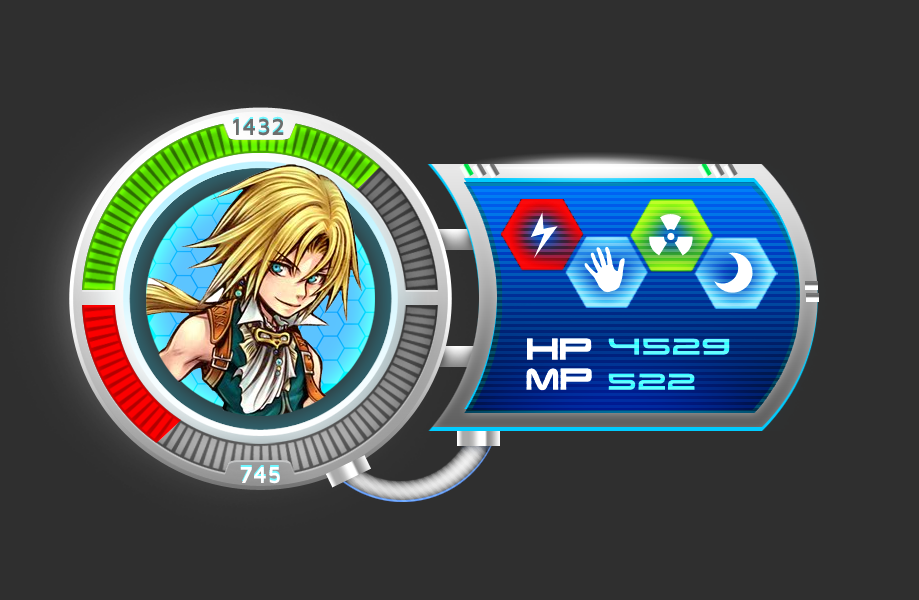
<style>
.page{position:relative;width:919px;height:600px;background:#2f2f2f}
.page>*{position:absolute;margin:0}
.t1{font:23.8px "MavenProBold";color:#6d6d6d}
.t2{font:29px "TerminatorRealNFI";letter-spacing:-0.02em;color:#ffffff}
.t3{font:29px "Spaceman";letter-spacing:-0.02em;color:#64fdff}
.t4{font:23.8px "MavenProBold";color:#ffffff}
</style>
<div class="page">
<p class="t1" style="left:233px;top:118px;width:51px;height:18px">1432</p>
<p class="t2" style="left:527px;top:338px;width:65px;height:22px">hp</p>
<p class="t3" style="left:608px;top:338px;width:122px;height:17px">4529</p>
<p class="t2" style="left:526px;top:368px;width:66px;height:23px">mp</p>
<p class="t3" style="left:608px;top:373px;width:87px;height:17px">522</p>
<p class="t4" style="left:240px;top:467px;width:40px;height:17px">745</p>
</div>
